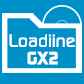
<style>
.page{position:relative;width:84px;height:84px;background:#0090c8}
.page>*{position:absolute;margin:0}
.t1{font:18px "ContinuumMedium";color:#ffffff}
.t2{font:18px "ContinuumBold";color:#ffffff}
</style>
<div class="page">
<p class="t1" style="left:9px;top:34px;width:66px;height:13px">Loadiine</p>
<p class="t2" style="left:27px;top:51px;width:31px;height:14px">GX2</p>
</div>
